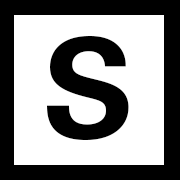
<style>
.page{position:relative;width:180px;height:180px;background:#ffffff}
.page>*{position:absolute;margin:0}
.t1{font:139.3px "UniversLTStd-Bold";letter-spacing:-0.01em;color:#000000}
</style>
<div class="page">
<p class="t1" style="left:47px;top:36px;width:82px;height:104px">S</p>
</div>
